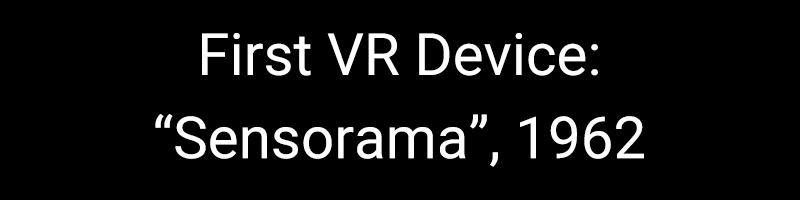
<style>
.page{position:relative;width:800px;height:200px;background:#000000}
.page>*{position:absolute;margin:0}
.t1{font:58.3px/83.3px "Roboto-Regular";color:#ffffff}
</style>
<div class="page">
<p class="t1" style="left:155px;top:33px;width:489px;height:134px;text-align:center">First VR Device:<br>“Sensorama”, 1962</p>
</div>
